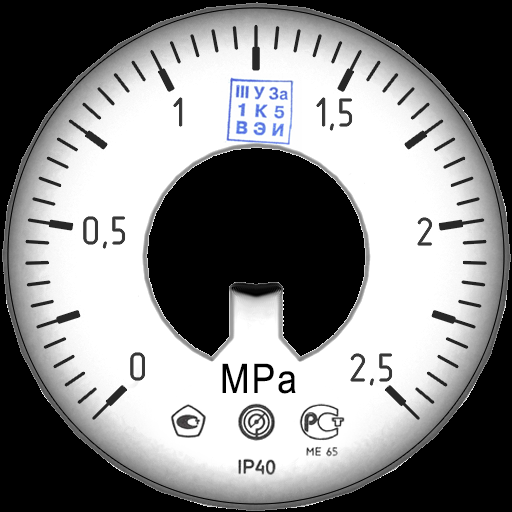
<style>
.page{position:relative;width:512px;height:512px;background:#000000}
.page>*{position:absolute;margin:0}
.t1{font:39.6px "Mipgost";letter-spacing:0.05em;color:#373737}
.t2{font:69.6px "ArialMT";letter-spacing:0.06em;color:#000000;scale:0.87 1}
</style>
<div class="page">
<p class="t1" style="left:173px;top:98px;width:9px;height:28px">1</p>
<p class="t1" style="left:316px;top:98px;width:36px;height:32px">1,5</p>
<p class="t1" style="left:83px;top:217px;width:42px;height:31px">0,5</p>
<p class="t1" style="left:418px;top:218px;width:14px;height:27px">2</p>
<p class="t1" style="left:130px;top:353px;width:15px;height:27px">0</p>
<p class="t2" style="left:222px;top:363px;width:74px;height:31px">MPa</p>
<p class="t1" style="left:351px;top:354px;width:41px;height:31px">2,5</p>
</div>
